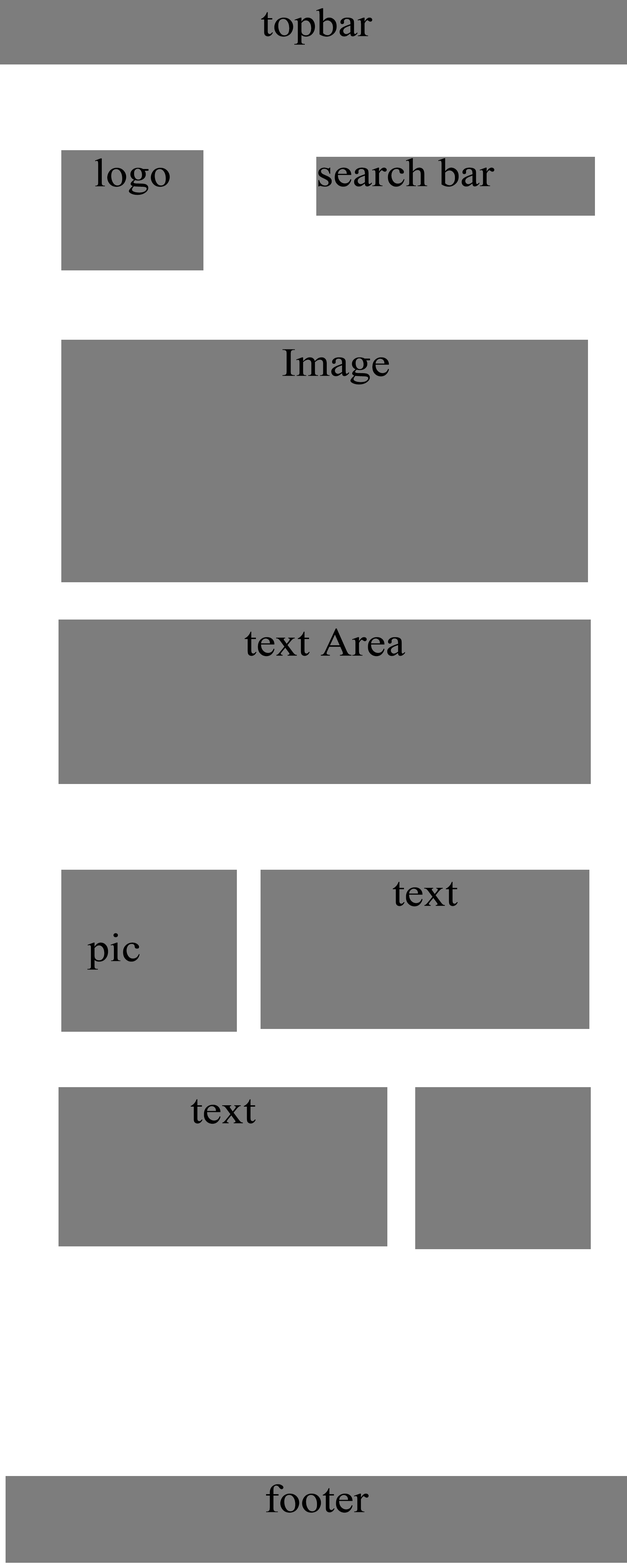
<style>
.page{position:relative;width:627px;height:1568px;background:#7d7d7d}
.page>*{position:absolute;margin:0}
.t1{font:40.1px "TimesNewRomanPSMT";color:#000000;scale:1.09 1}
</style>
<div class="page">
<p class="t1" style="left:261px;top:8px;width:111px;height:37px">topbar</p>
<p class="t1" style="left:95px;top:158px;width:75px;height:37px">logo</p>
<p class="t1" style="left:318px;top:158px;width:176px;height:29px">search bar</p>
<p class="t1" style="left:283px;top:349px;width:106px;height:36px">Image</p>
<p class="t1" style="left:245px;top:628px;width:160px;height:28px">text Area</p>
<p class="t1" style="left:393px;top:882px;width:65px;height:25px">text</p>
<p class="t1" style="left:87px;top:933px;width:53px;height:37px">pic</p>
<p class="t1" style="left:191px;top:1099px;width:65px;height:25px">text</p>
<p class="t1" style="left:266px;top:1484px;width:103px;height:29px">footer</p>
</div>
